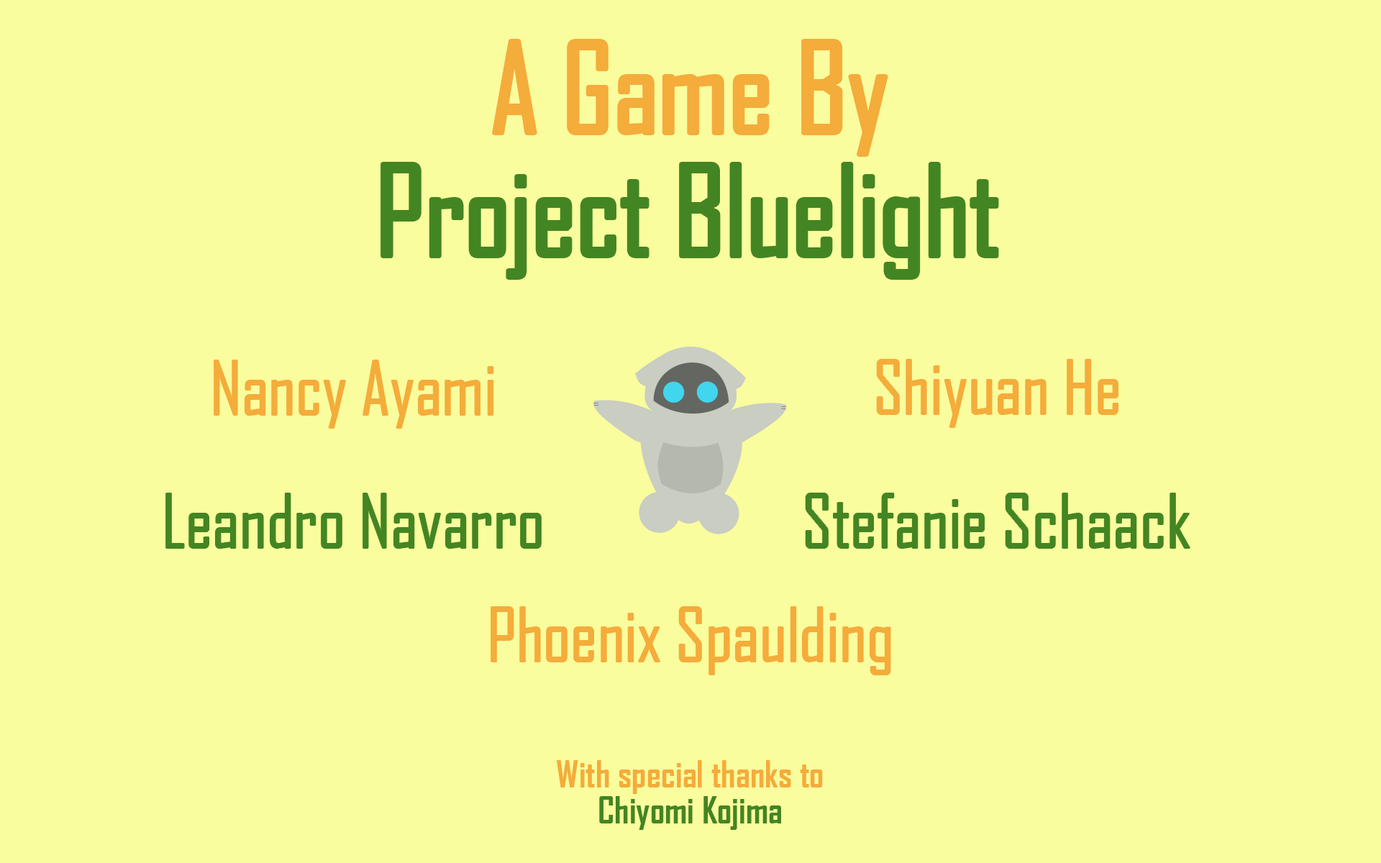
<style>
.page{position:relative;width:1381px;height:863px;background:#fafd9d}
.page>*{position:absolute;margin:0}
.t1{font:119.9px "AgencyFB-Reg";color:#f4ac3b}
.t2{font:119.9px "AgencyFB-Reg";color:#448523}
.t3{font:71.9px "AgencyFB-Reg";color:#f4ac3b}
.t4{font:71.9px "AgencyFB-Reg";color:#448523}
.t5{font:36px/36px "AgencyFB-Bold";color:#f4ac3b}
.t6{font:36px/36px "AgencyFB-Bold";color:#448523}
</style>
<div class="page">
<p class="t1" style="left:494px;top:41px;width:392px;height:114px">A Game By</p>
<p class="t2" style="left:383px;top:164px;width:614px;height:114px">Project Bluelight</p>
<p class="t3" style="left:214px;top:360px;width:280px;height:68px">Nancy Ayami</p>
<p class="t3" style="left:877px;top:360px;width:241px;height:67px">Shiyuan He</p>
<p class="t4" style="left:166px;top:494px;width:375px;height:54px">Leandro Navarro</p>
<p class="t4" style="left:806px;top:494px;width:384px;height:54px">Stefanie Schaack</p>
<p class="t3" style="left:491px;top:607px;width:400px;height:68px">Phoenix Spaulding</p>
<p class="t5" style="left:556px;top:760px;width:267px;height:70px;text-align:center">With special thanks to<br><span class="t6">Chiyomi Kojima</span></p>
</div>
